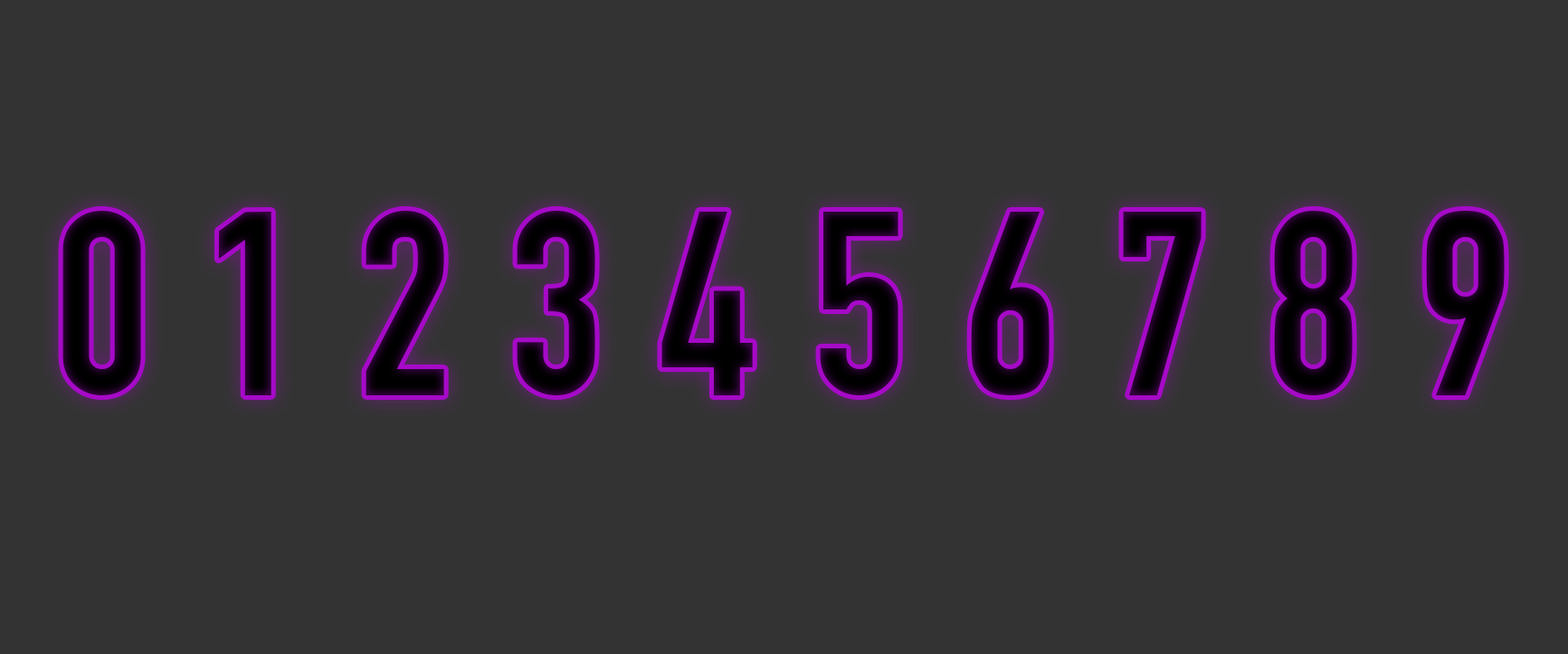
<style>
.page{position:relative;width:1568px;height:654px;background:#333333}
.page>*{position:absolute;margin:0}
.t1{font:256px "DINEngschrift";letter-spacing:0.22em;color:#09010b}
</style>
<div class="page">
<p class="t1" style="left:62px;top:211px;width:1443px;height:185px">0123456789</p>
</div>
